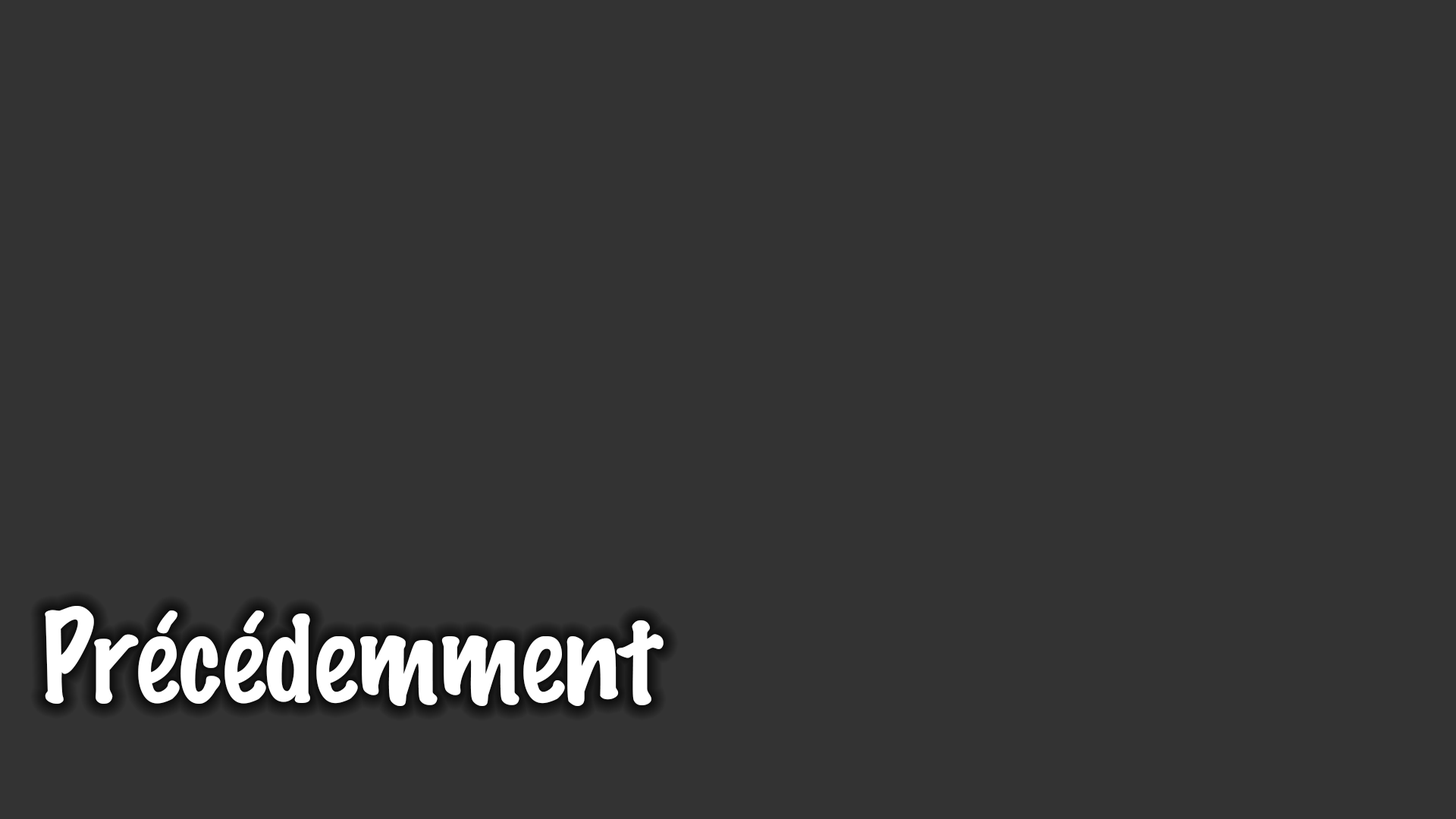
<style>
.page{position:relative;width:1456px;height:819px;background:#333333}
.page>*{position:absolute;margin:0}
.t1{font:113.7px "MarkerFelt-Thin";color:#ffffff}
</style>
<div class="page">
<p class="t1" style="left:45px;top:606px;width:619px;height:100px">Précédemment</p>
</div>
